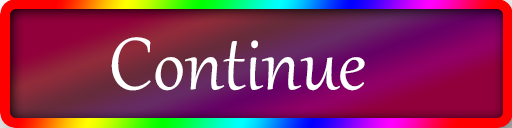
<style>
.page{position:relative;width:512px;height:128px}
.page>*{position:absolute;margin:0}
.t1{font:90px "Gabriola";color:#ffffff}
</style>
<div class="page">
<p class="t1" style="left:111px;top:37px;width:254px;height:54px">Continue</p>
</div>
